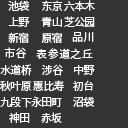
<style>
.page{position:relative;width:128px;height:128px;background:#333333}
.page>*{position:absolute;margin:0}
.t1{font:11px/16px "SourceHanSansSC-Regular";letter-spacing:-0.06em;color:#ffffff}
.t2{font:11px "SourceHanSansSC-Regular";letter-spacing:0.04em;color:#ffffff}
</style>
<div class="page">
<p class="t1" style="left:8px;top:0px;width:87px;height:43px">池袋       东京 六本木<br>     上野       青山 芝公园<br>     新宿       原宿</p>
<p class="t2" style="left:72px;top:32px;width:22px;height:10px">品川</p>
<p class="t2" style="left:4px;top:47px;width:23px;height:12px">市谷</p>
<p class="t2" style="left:36px;top:48px;width:57px;height:11px">表参道之丘</p>
<p class="t1" style="left:0px;top:64px;width:95px;height:59px">水道桥      涉谷      中野<br>秋叶原 惠比寿     初台<br>九段下永田町      沼袋<br>     神田      赤坂</p>
</div>
